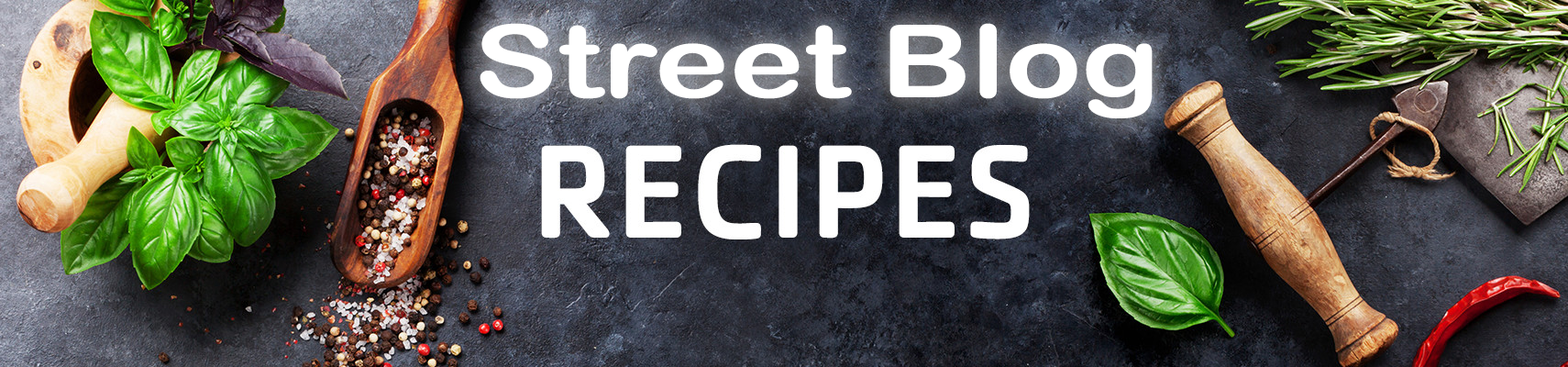
<style>
.page{position:relative;width:1568px;height:367px}
.page>*{position:absolute;margin:0}
.t1{font:100.9px "ArialRoundedMTBold";color:#ffffff;scale:1.25 1}
</style>
<div class="page">
<p class="t1" style="left:480px;top:23px;width:673px;height:95px">Street Blog</p>
</div>
